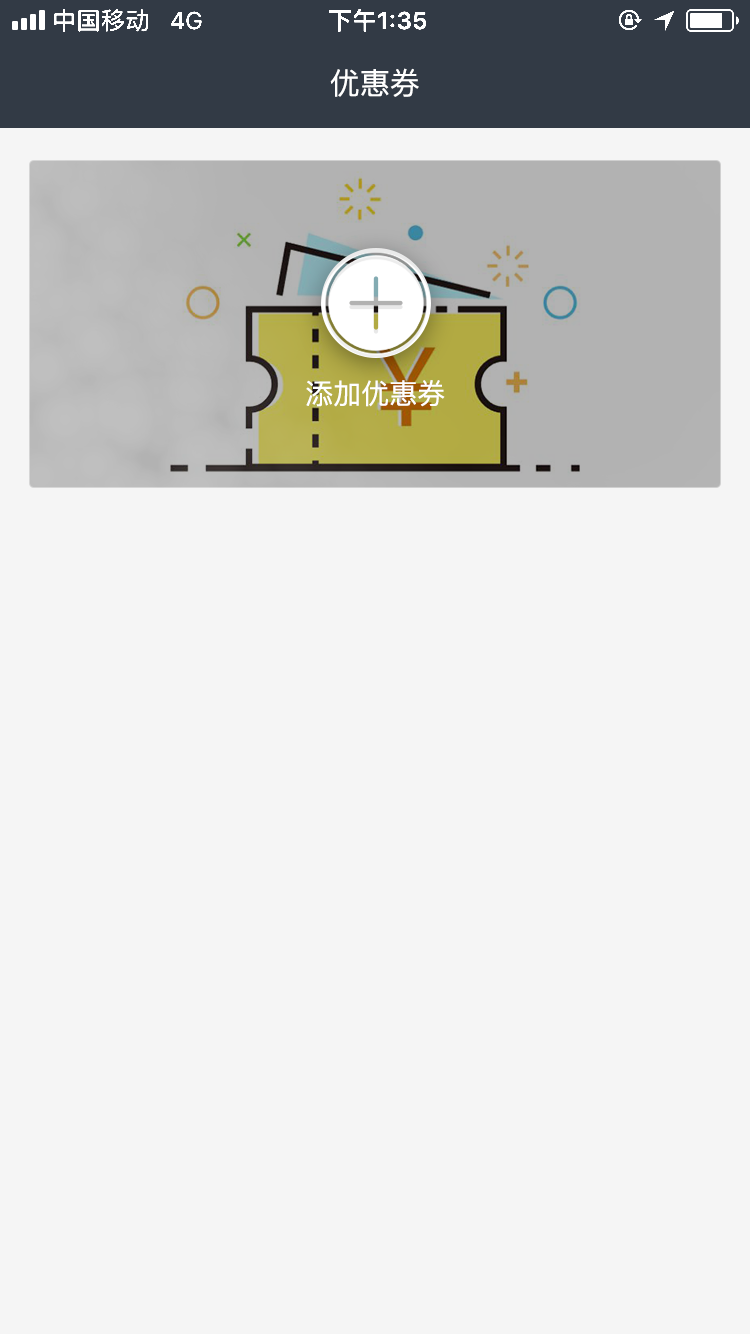
<style>
.page{position:relative;width:750px;height:1334px;background:#f5f5f5}
.page>*{position:absolute;margin:0}
.t1{font:30px "PingFang-SC-Medium";color:#ffffff}
.t2{font:28px "PingFang-SC-Medium";color:#ffffff}
</style>
<div class="page">
<p class="t1" style="left:330px;top:68px;width:89px;height:29px">优惠券</p>
<p class="t2" style="left:306px;top:380px;width:139px;height:27px">添加优惠券</p>
</div>
